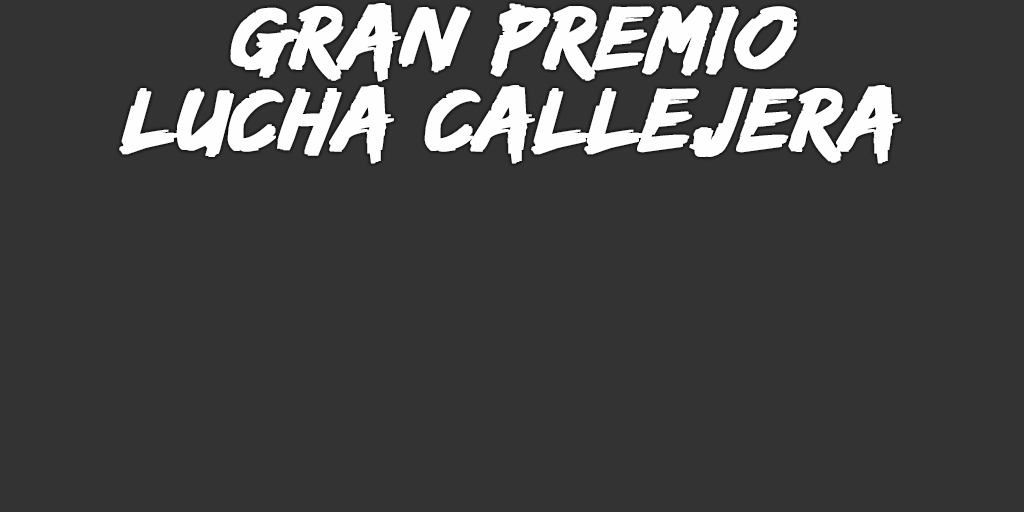
<style>
.page{position:relative;width:1024px;height:512px;background:#333333}
.page>*{position:absolute;margin:0}
.t1{font:93px/82px "EdoSZ";color:#fefefe;font-weight:bold;font-style:italic;scale:1.04 1}
</style>
<div class="page">
<p class="t1" style="left:119px;top:3px;width:782px;height:161px;text-align:center">gran premio<br>lucha callejera</p>
</div>
